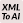
<style>
.page{position:relative;width:23px;height:23px;background:#ece1e0}
.page>*{position:absolute;margin:0}
.t1{font:9px/9px "Lato-BlackItalic";letter-spacing:-0.025em;color:#000000}
</style>
<div class="page">
<p class="t1" style="left:1px;top:4px;width:19px;height:16px;text-align:center">XML<br>To AI</p>
</div>
